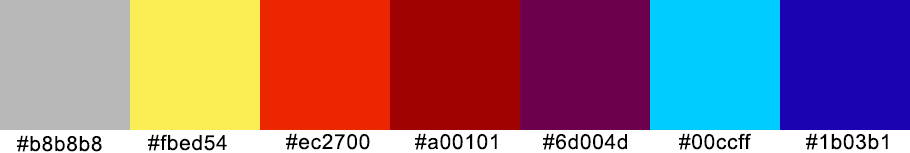
<style>
.page{position:relative;width:910px;height:153px}
.page>*{position:absolute;margin:0}
.t1{font:20.8px "ArialMT";letter-spacing:0.035em;color:#000000}
</style>
<div class="page">
<p class="t1" style="left:17px;top:135px;width:85px;height:17px">#b8b8b8</p>
<p class="t1" style="left:148px;top:134px;width:79px;height:17px">#fbed54</p>
<p class="t1" style="left:286px;top:133px;width:84px;height:17px">#ec2700</p>
<p class="t1" style="left:415px;top:133px;width:82px;height:17px">#a00101</p>
<p class="t1" style="left:543px;top:133px;width:84px;height:17px">#6d004d</p>
<p class="t1" style="left:679px;top:133px;width:72px;height:17px">#00ccff</p>
<p class="t1" style="left:806px;top:133px;width:82px;height:17px">#1b03b1</p>
</div>
